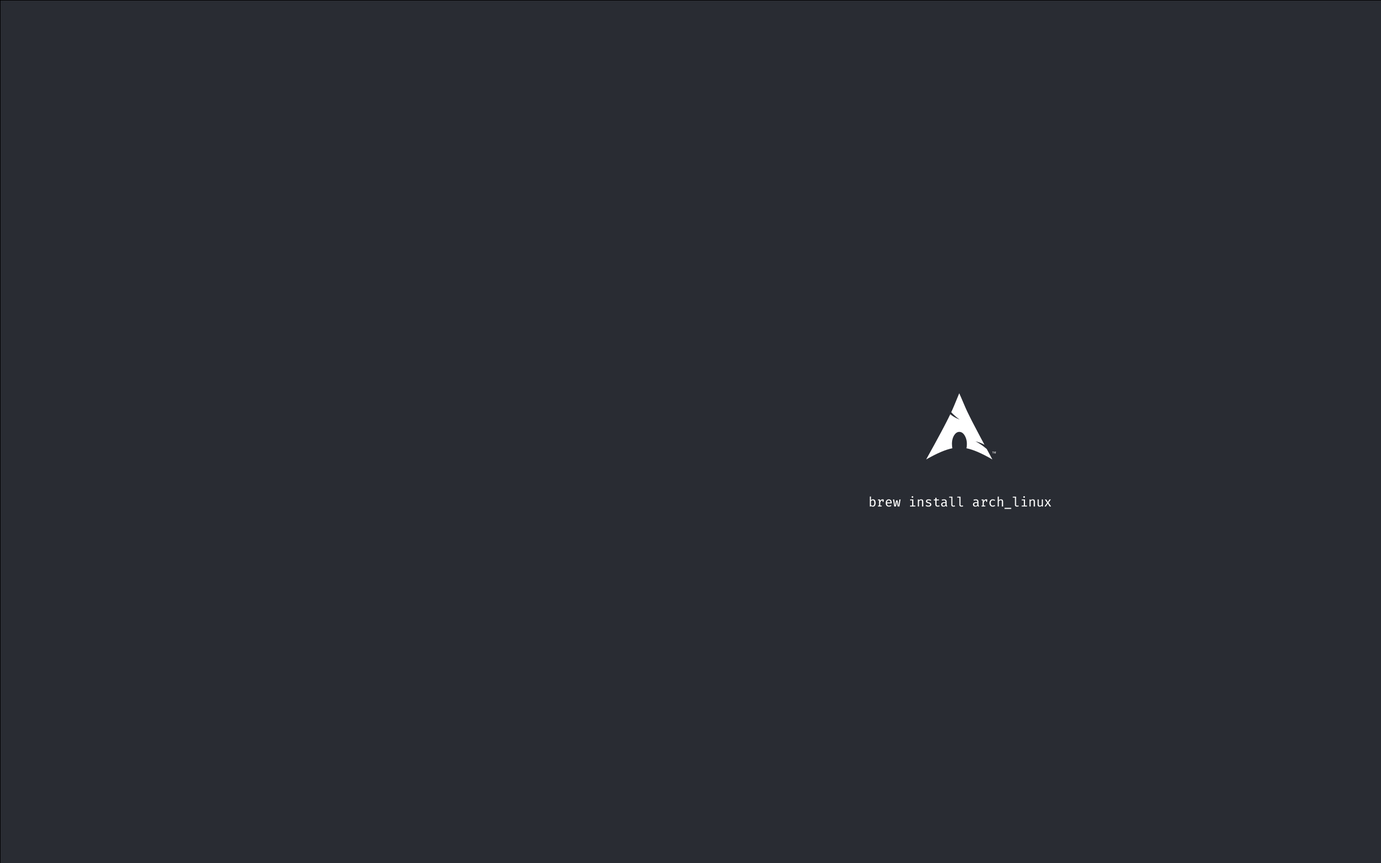
<style>
.page{position:relative;width:1381px;height:863px;background:#292c33}
.page>*{position:absolute;margin:0}
.t1{font:12.9px "FiraCodeNerdFontCompleteM-Regular";color:#ffffff}
</style>
<div class="page">
<p class="t1" style="left:870px;top:496px;width:182px;height:13px">brew install arch_linux</p>
</div>
